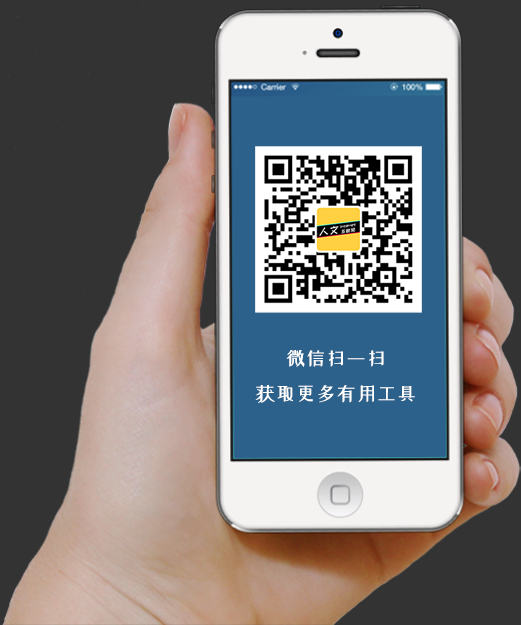
<style>
.page{position:relative;width:521px;height:625px;background:#333333}
.page>*{position:absolute;margin:0}
.t1{font:20.2px "xiaowei";color:#ffffff}
</style>
<div class="page">
<p class="t1" style="left:255px;top:350px;width:160px;height:53px;text-align:center">微信扫一扫<br>获取更多有用工具</p>
</div>
